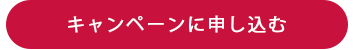
<style>
.page{position:relative;width:353px;height:50px;background:#c9113d}
.page>*{position:absolute;margin:0}
.t1{font:18px "KozGoPr6N-Regular";letter-spacing:0.1em;color:#ffffff;font-weight:bold}
</style>
<div class="page">
<p class="t1" style="left:68px;top:15px;width:218px;height:18px">キャンペーンに申し込む</p>
</div>
